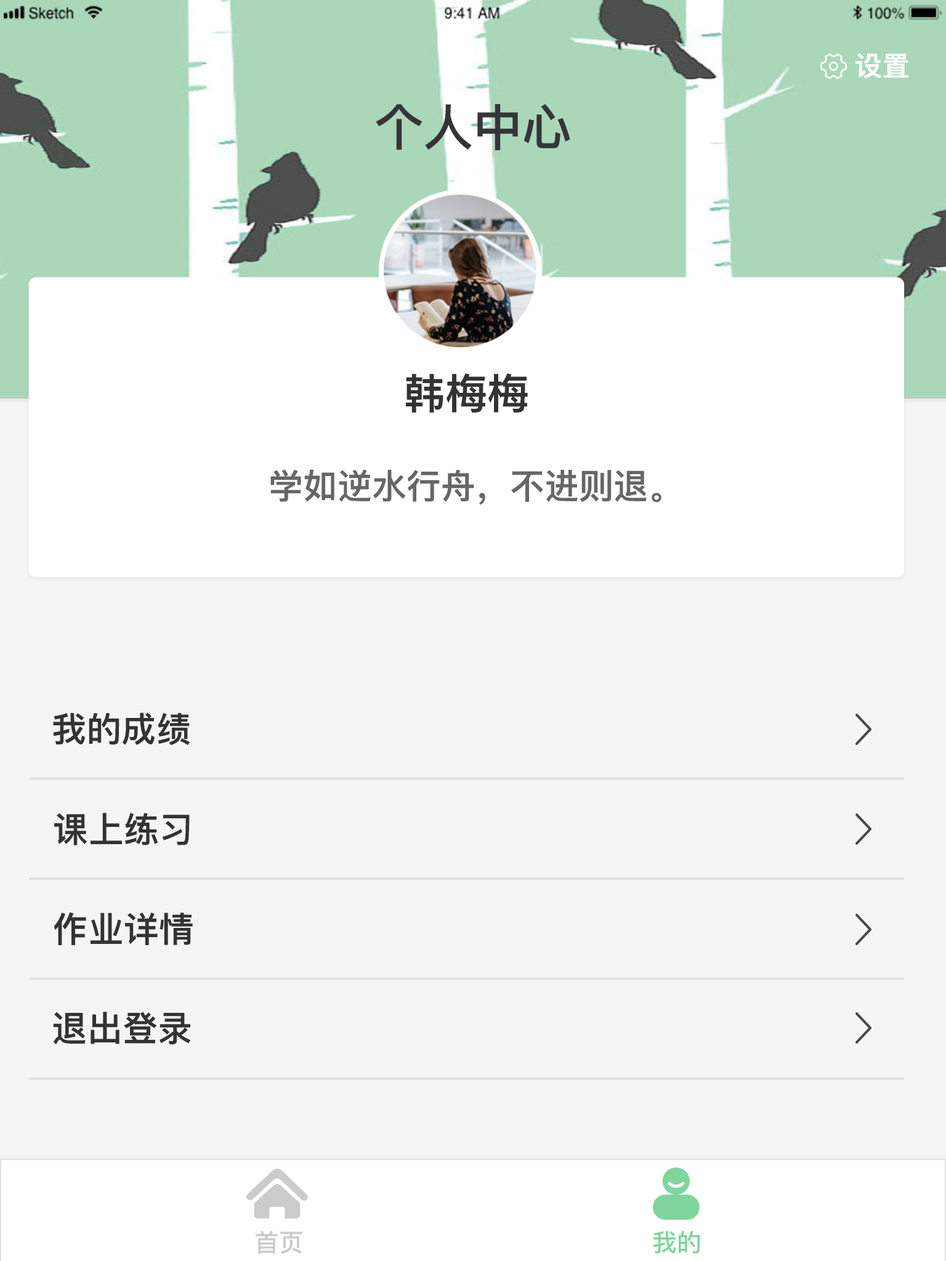
<style>
.page{position:relative;width:946px;height:1261px;background:#f5f5f5}
.page>*{position:absolute;margin:0}
.t1{font:27.1px "PingFang-SC-Heavy";letter-spacing:0.02em;color:#ffffff}
.t2{font:49.3px "PingFang-SC-Heavy";color:#353535}
.t3{font:41.9px "PingFang-SC-Heavy";color:#333333}
.t4{font:34.5px "PingFang-SC-Heavy";color:#666666}
.t5{font:34.5px "PingFang-SC-Heavy";letter-spacing:0.01em;color:#333333}
.t6{font:35px "PingFang-SC-Heavy";letter-spacing:0.01em;color:#333333}
.t7{font:24.6px "PingFangSC-Medium";color:#cbcbcb}
.t8{font:24.6px "PingFangSC-Medium";color:#80d59c}
</style>
<div class="page">
<p class="t1" style="left:855px;top:53px;width:53px;height:25px">设置</p>
<p class="t2" style="left:376px;top:104px;width:194px;height:46px">个人中心</p>
<p class="t3" style="left:406px;top:373px;width:122px;height:40px">韩梅梅</p>
<p class="t4" style="left:270px;top:469px;width:391px;height:36px">学如逆水行舟，不进则退。</p>
<p class="t5" style="left:53px;top:712px;width:137px;height:34px">我的成绩</p>
<p class="t6" style="left:54px;top:813px;width:136px;height:32px">课上练习</p>
<p class="t6" style="left:54px;top:912px;width:139px;height:33px">作业详情</p>
<p class="t6" style="left:53px;top:1012px;width:138px;height:32px">退出登录</p>
<p class="t7" style="left:256px;top:1231px;width:46px;height:23px">首页</p>
<p class="t8" style="left:653px;top:1231px;width:47px;height:23px">我的</p>
</div>
